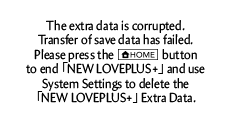
<style>
.page{position:relative;width:232px;height:122px;background:#ffffff}
.page>*{position:absolute;margin:0}
.t1{font:13.2px "Amira-Roman";color:#000000;scale:0.91 1}
.t2{font:13.2px "KozGoPr6N-Regular";color:#000000;scale:0.91 1}
</style>
<div class="page">
<p class="t1" style="left:38px;top:20px;width:155px;height:25px;text-align:center">The extra data is corrupted. <br>Transfer of save data has failed.</p>
<p class="t1" style="left:26px;top:49px;width:179px;height:54px;text-align:center">Please press the                  button <br>to end <span class="t2">「</span>NEW LOVEPLUS+<span class="t2">」</span> and use <br>System Settings to delete the <br><span class="t2">「</span>NEW LOVEPLUS+<span class="t2">」</span> Extra Data.</p>
</div>
